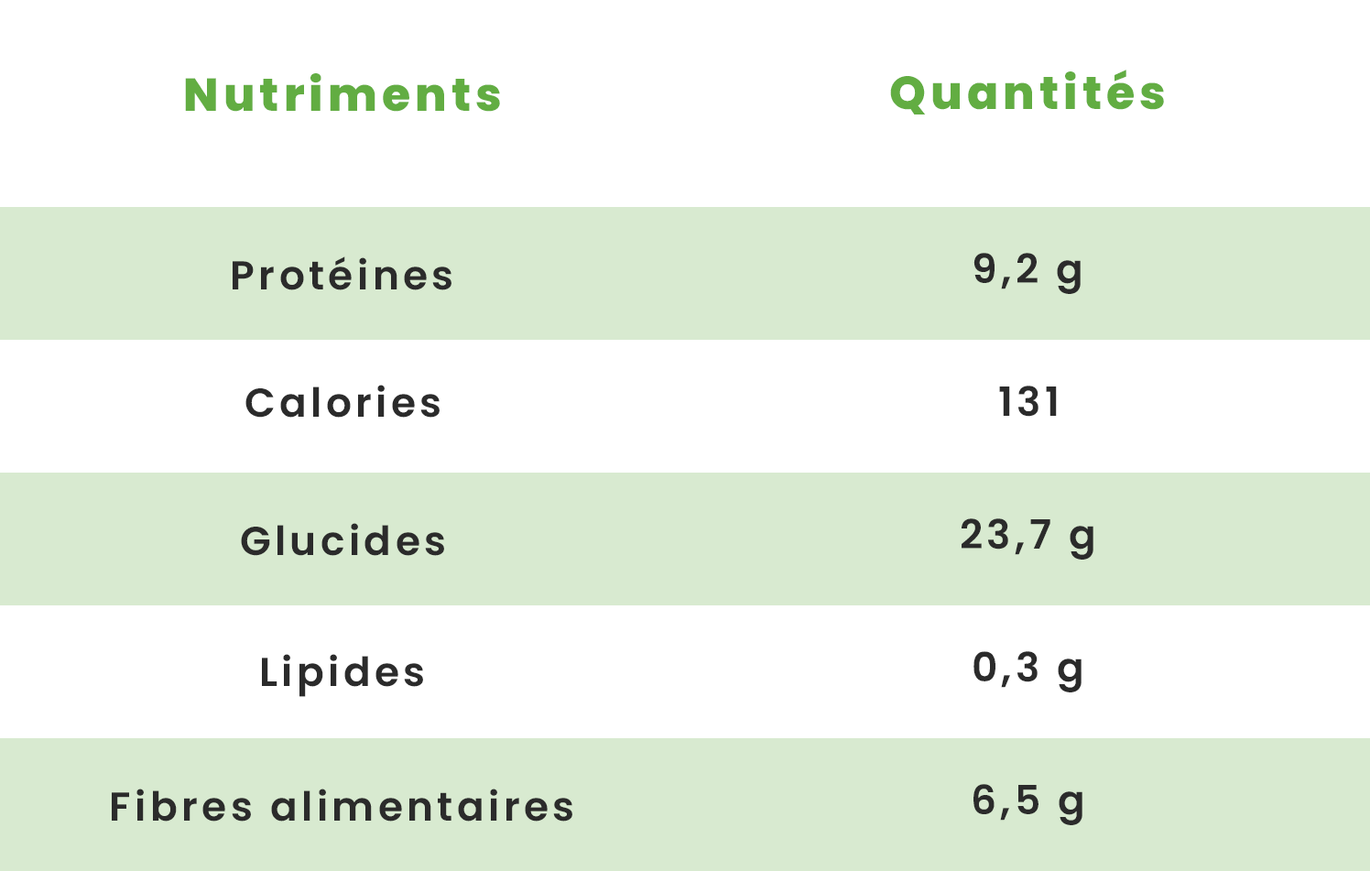
<style>
.page{position:relative;width:1370px;height:871px;background:#ffffff}
.page>*{position:absolute;margin:0}
.t1{font:46.1px "Poppins-ExtraBold";letter-spacing:0.1em;color:#62ad42}
.t2{font:40.2px "Poppins-SemiBold";letter-spacing:0.1em;color:#2b2b2b}
</style>
<div class="page">
<p class="t1" style="left:185px;top:73px;width:315px;height:39px">Nutriments</p>
<p class="t1" style="left:890px;top:70px;width:274px;height:44px">Quantités</p>
<p class="t2" style="left:233px;top:256px;width:218px;height:34px">Protéines</p>
<p class="t2" style="left:973px;top:253px;width:107px;height:41px">9,2 g</p>
<p class="t2" style="left:245px;top:385px;width:194px;height:32px">Calories</p>
<p class="t2" style="left:999px;top:385px;width:57px;height:32px">131</p>
<p class="t2" style="left:961px;top:518px;width:132px;height:41px">23,7 g</p>
<p class="t2" style="left:241px;top:523px;width:203px;height:33px">Glucides</p>
<p class="t2" style="left:262px;top:654px;width:161px;height:43px">Lipides</p>
<p class="t2" style="left:973px;top:651px;width:108px;height:41px">0,3 g</p>
<p class="t2" style="left:973px;top:784px;width:109px;height:41px">6,5 g</p>
<p class="t2" style="left:112px;top:788px;width:460px;height:33px">Fibres alimentaires</p>
</div>
